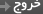
<style>
.page{position:relative;width:43px;height:14px}
.page>*{position:absolute;margin:0}
.t1{font:14px "BYekan";color:#ffffff}
</style>
<div class="page">
<p class="t1" style="left:13px;top:0px;width:28px;height:14px">خروج</p>
</div>
